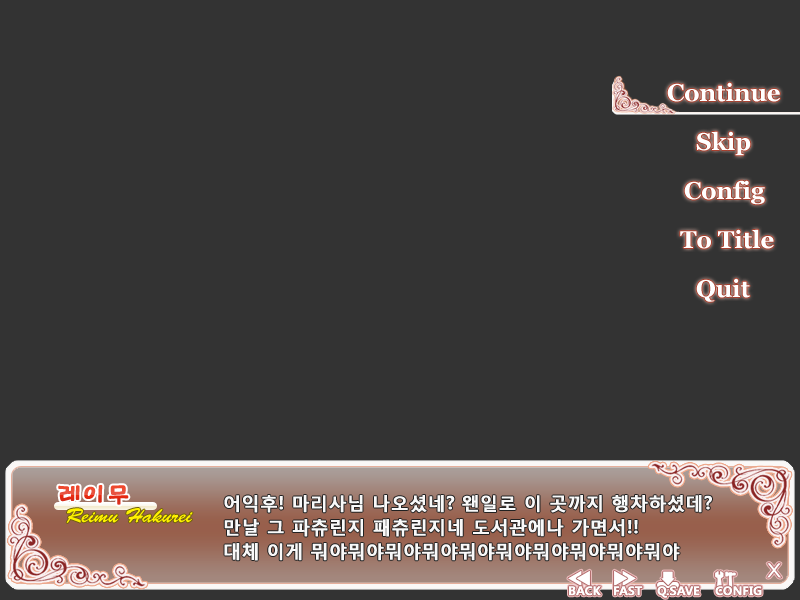
<style>
.page{position:relative;width:800px;height:600px;background:#333333}
.page>*{position:absolute;margin:0}
.t1{font:24px "Georgia-Bold";color:#ffffff}
.t2{font:18px/24px "MalgunGothicBold";color:#f9f9f9;font-weight:bold}
</style>
<div class="page">
<p class="t1" style="left:667px;top:82px;width:113px;height:20px">Continue</p>
<p class="t1" style="left:696px;top:131px;width:55px;height:25px">Skip</p>
<p class="t1" style="left:684px;top:180px;width:81px;height:25px">Config</p>
<p class="t1" style="left:680px;top:229px;width:94px;height:20px">To Title</p>
<p class="t1" style="left:696px;top:278px;width:54px;height:24px">Quit</p>
<p class="t2" style="left:224px;top:495px;width:488px;height:66px">어익후! 마리사님 나오셨네? 왠일로 이 곳까지 행차하셨데?<br>만날 그 파츄린지 패츄린지네 도서관에나 가면서!!<br>대체 이게 뭐야뭐야뭐야뭐야뭐야뭐야뭐야뭐야뭐야뭐야</p>
</div>
